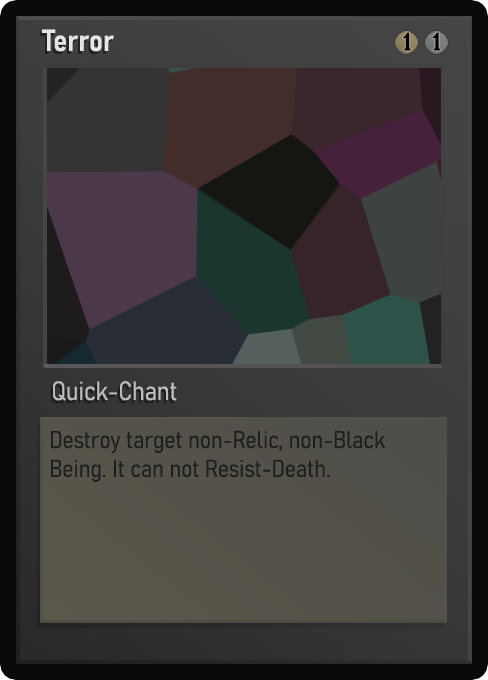
<style>
.page{position:relative;width:488px;height:680px}
.page>*{position:absolute;margin:0}
.t1{font:30px "Bahnschrift-SemiBoldSemiCondensed";color:#f2f2f2;font-weight:bold}
.t2{font:25px "WTRRoycroft";color:#000000;font-weight:bold;scale:1.09 1}
.t3{font:26px "Bahnschrift-LightSemiCondensed";color:#c8c8c8;font-weight:bold}
.t4{font:24px "Bahnschrift-LightSemiCondensed";color:#1e1e1e;font-weight:bold}
</style>
<div class="page">
<p class="t1" style="left:42px;top:29px;width:72px;height:23px;opacity:0.9">Terror</p>
<p class="t2" style="left:403px;top:32px;width:8px;height:19px">1</p>
<p class="t2" style="left:432px;top:32px;width:9px;height:19px">1</p>
<p class="t3" style="left:53px;top:381px;width:124px;height:20px;opacity:0.9">Quick-Chant</p>
<p class="t4" style="left:51px;top:430px;width:335px;height:52px">Destroy target non-Relic, non-Black Being. It can not Resist-Death.</p>
</div>
